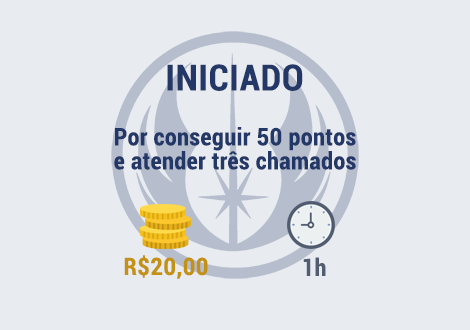
<style>
.page{position:relative;width:470px;height:330px;background:#e8ebf0}
.page>*{position:absolute;margin:0}
.t1{font:36px "Roboto-BoldCondensed";letter-spacing:0.02em;color:#243867}
.t2{font:24px/24px "Roboto-BoldCondensed";letter-spacing:0.02em;color:#243867}
.t3{font:24px "Roboto-BoldCondensed";letter-spacing:0.02em;color:#c39114}
.t4{font:24px "Roboto-BoldCondensed";letter-spacing:0.02em;color:#535d72}
</style>
<div class="page">
<p class="t1" style="left:167px;top:64px;width:136px;height:27px">INICIADO</p>
<p class="t2" style="left:114px;top:127px;width:242px;height:43px;text-align:center">Por conseguir 50 pontos e atender três chamados</p>
<p class="t3" style="left:124px;top:255px;width:84px;height:24px">R$20,00</p>
<p class="t4" style="left:303px;top:257px;width:23px;height:19px">1h</p>
</div>
